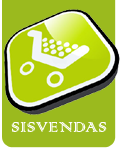
<style>
.page{position:relative;width:120px;height:150px;background:#9bba1e}
.page>*{position:absolute;margin:0}
.t1{font:18.4px "ColonnaMT";letter-spacing:0.031em;color:#ffffff}
</style>
<div class="page">
<p class="t1" style="left:11px;top:122px;width:96px;height:10px">SISVENDAS</p>
</div>
